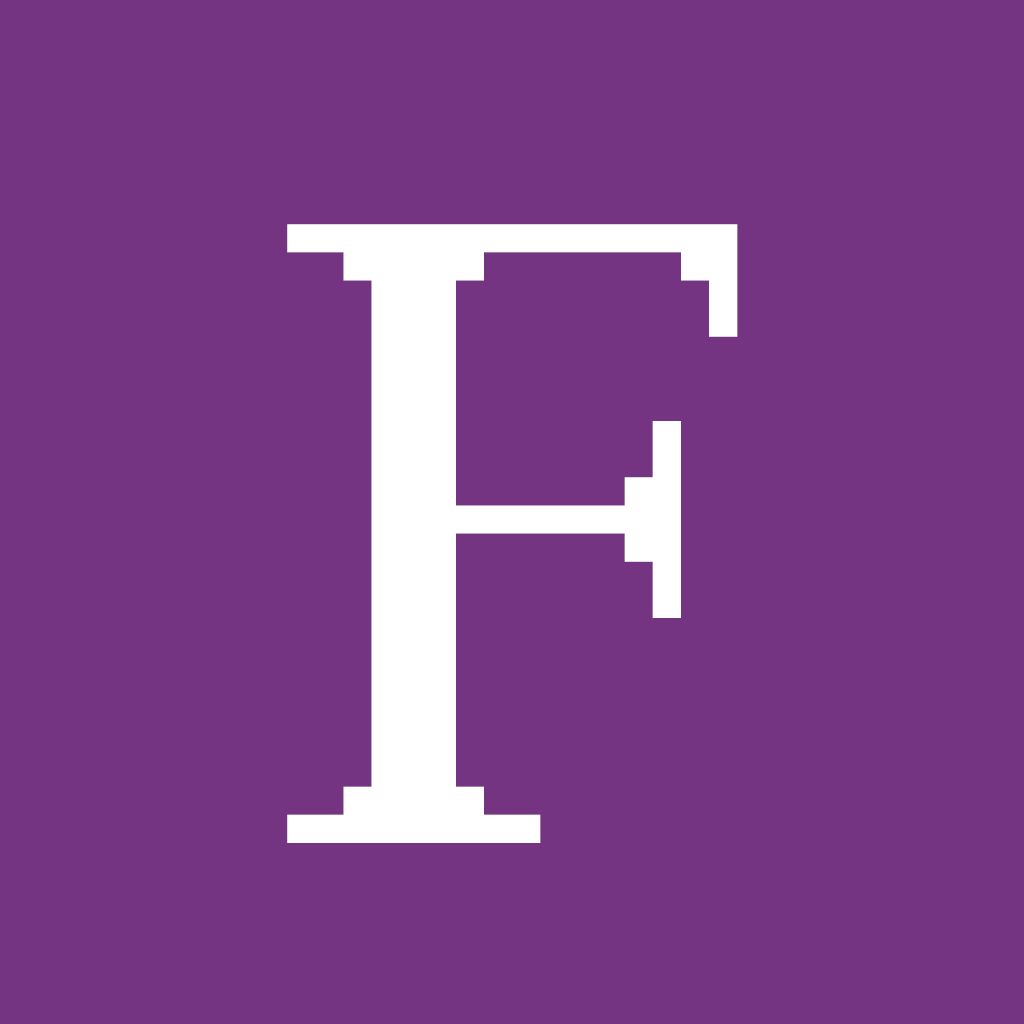
<style>
.page{position:relative;width:1024px;height:1024px;background:#743481}
.page>*{position:absolute;margin:0}
.t1{font:900px "MS Serif";color:#ffffff}
</style>
<div class="page">
<p class="t1" style="left:287px;top:224px;width:451px;height:619px">F</p>
</div>
